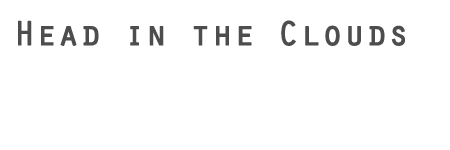
<style>
.page{position:relative;width:450px;height:150px;background:#ffffff}
.page>*{position:absolute;margin:0}
.t1{font:34px "Orator-Regular";color:#4d4d4d;font-weight:bold}
</style>
<div class="page">
<p class="t1" style="left:18px;top:20px;width:387px;height:26px">Head in the Clouds</p>
</div>
